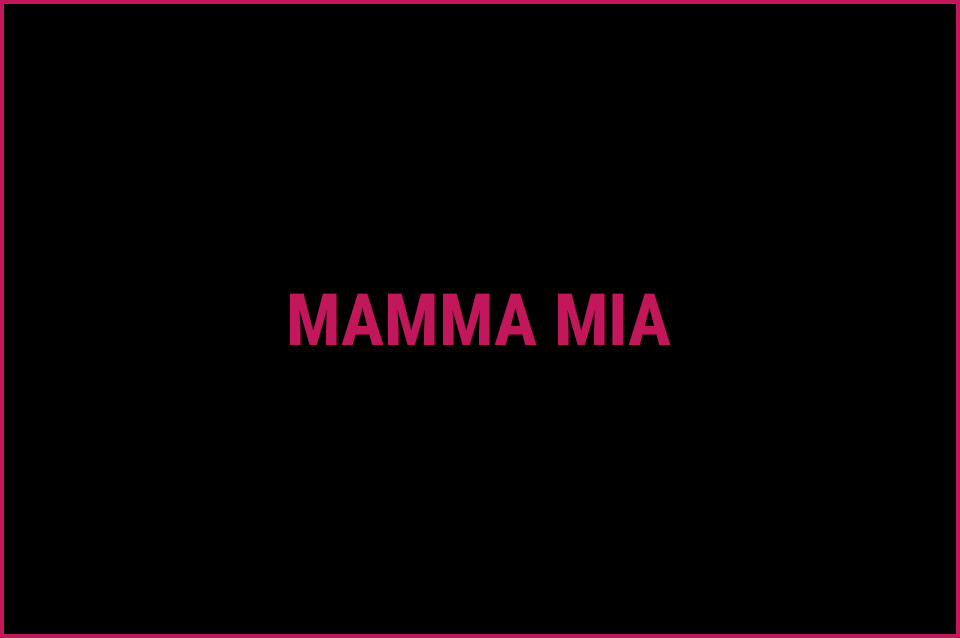
<style>
.page{position:relative;width:960px;height:638px;background:#000000}
.page>*{position:absolute;margin:0}
.t1{font:72px "RobotoCondensed-Bold";color:#c2185b}
</style>
<div class="page">
<p class="t1" style="left:290px;top:293px;width:381px;height:52px">MAMMA MIA</p>
</div>
